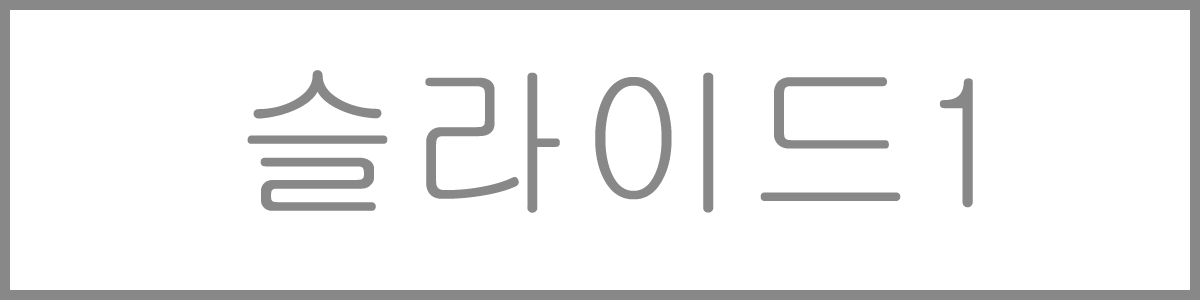
<style>
.page{position:relative;width:1200px;height:300px;background:#ffffff}
.page>*{position:absolute;margin:0}
.t1{font:171.1px "Gulim";color:#888888}
</style>
<div class="page">
<p class="t1" style="left:247px;top:70px;width:726px;height:143px">슬라이드1</p>
</div>
